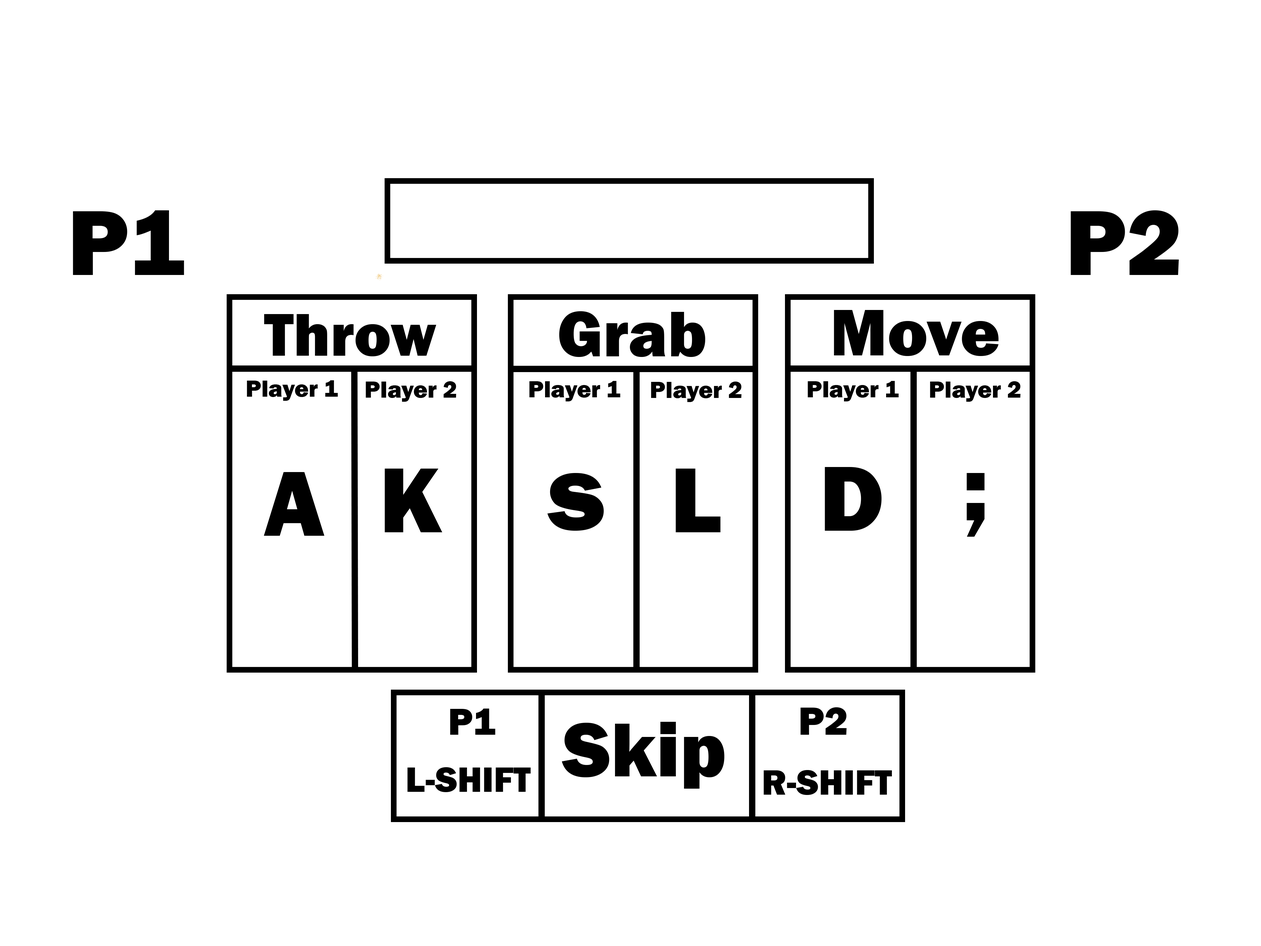
<style>
.page{position:relative;width:1261px;height:946px;background:#ffffff}
.page>*{position:absolute;margin:0}
.t1{font:95.5px "FranklinGothic-Heavy";color:#000000}
.t2{font:62.4px "FranklinGothic-Heavy";color:#000000}
.t3{font:66.8px "FranklinGothic-Heavy";color:#000000}
.t4{font:68.1px "FranklinGothic-Heavy";color:#000000}
.t5{font:24.3px "FranklinGothic-Heavy";color:#000000}
.t6{font:111.3px "FranklinGothic-Heavy";color:#000000}
.t7{font:38.8px "FranklinGothic-Heavy";color:#000000}
.t8{font:40.7px "FranklinGothic-Heavy";color:#000000}
.t9{font:79.1px "FranklinGothic-Heavy";color:#000000}
.t10{font:36.3px "FranklinGothic-Heavy";color:#000000}
</style>
<div class="page">
<p class="t1" style="left:73px;top:210px;width:111px;height:65px">P1</p>
<p class="t1" style="left:1071px;top:210px;width:108px;height:65px">P2</p>
<p class="t2" style="left:264px;top:314px;width:172px;height:42px">Throw</p>
<p class="t3" style="left:559px;top:311px;width:146px;height:46px">Grab</p>
<p class="t4" style="left:834px;top:310px;width:165px;height:46px">Move</p>
<p class="t5" style="left:247px;top:380px;width:91px;height:21px">Player 1</p>
<p class="t5" style="left:366px;top:381px;width:90px;height:21px">Player 2</p>
<p class="t5" style="left:529px;top:381px;width:91px;height:20px">Player 1</p>
<p class="t5" style="left:651px;top:381px;width:90px;height:21px">Player 2</p>
<p class="t5" style="left:808px;top:381px;width:91px;height:20px">Player 1</p>
<p class="t5" style="left:930px;top:381px;width:90px;height:21px">Player 2</p>
<p class="t1" style="left:264px;top:472px;width:60px;height:64px">A</p>
<p class="t1" style="left:385px;top:468px;width:57px;height:64px">K</p>
<p class="t6" style="left:547px;top:473px;width:57px;height:58px">s</p>
<p class="t1" style="left:676px;top:468px;width:45px;height:64px">L</p>
<p class="t1" style="left:825px;top:467px;width:57px;height:64px">D</p>
<p class="t1" style="left:966px;top:473px;width:18px;height:64px">;</p>
<p class="t7" style="left:450px;top:708px;width:45px;height:26px">P1</p>
<p class="t8" style="left:800px;top:707px;width:47px;height:27px">P2</p>
<p class="t9" style="left:562px;top:722px;width:162px;height:66px">Skip</p>
<p class="t10" style="left:407px;top:767px;width:124px;height:25px">L-SHIFT</p>
<p class="t10" style="left:763px;top:770px;width:129px;height:25px">R-SHIFT</p>
</div>
